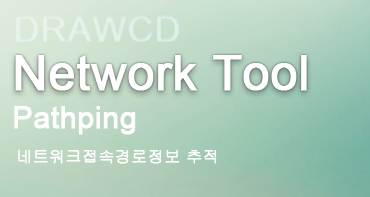
<style>
.page{position:relative;width:370px;height:197px}
.page>*{position:absolute;margin:0}
.t1{font:48px "ArialMT";color:#ffffff;font-weight:bold}
.t2{font:30px "ArialMT";color:#ffffff;font-weight:bold}
.t3{font:16px "Gulim";color:#ffffff;font-weight:bold}
</style>
<div class="page">
<p class="t1" style="left:15px;top:55px;width:292px;height:36px">Network Tool</p>
<p class="t2" style="left:14px;top:106px;width:122px;height:29px">Pathping</p>
<p class="t3" style="left:18px;top:150px;width:199px;height:14px">네트워크접속경로정보 추적</p>
</div>
